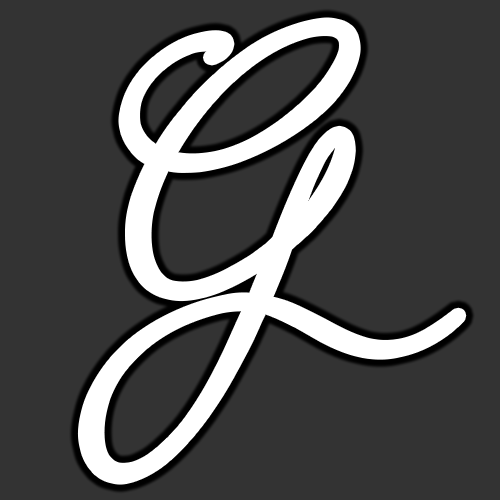
<style>
.page{position:relative;width:500px;height:500px;background:#333333}
.page>*{position:absolute;margin:0}
.t1{font:369.2px "BrotherhoodScript";color:#ffffff}
</style>
<div class="page">
<p class="t1" style="left:85px;top:25px;width:374px;height:452px">G</p>
</div>
